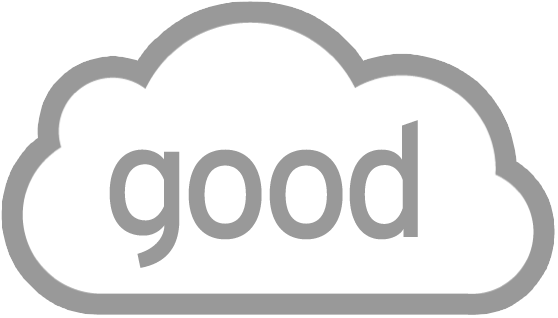
<style>
.page{position:relative;width:558px;height:318px;background:#ffffff}
.page>*{position:absolute;margin:0}
.t1{font:160px "ExpresswayRg-Regular";color:#999999}
</style>
<div class="page">
<p class="t1" style="left:109px;top:120px;width:309px;height:148px">good</p>
</div>
